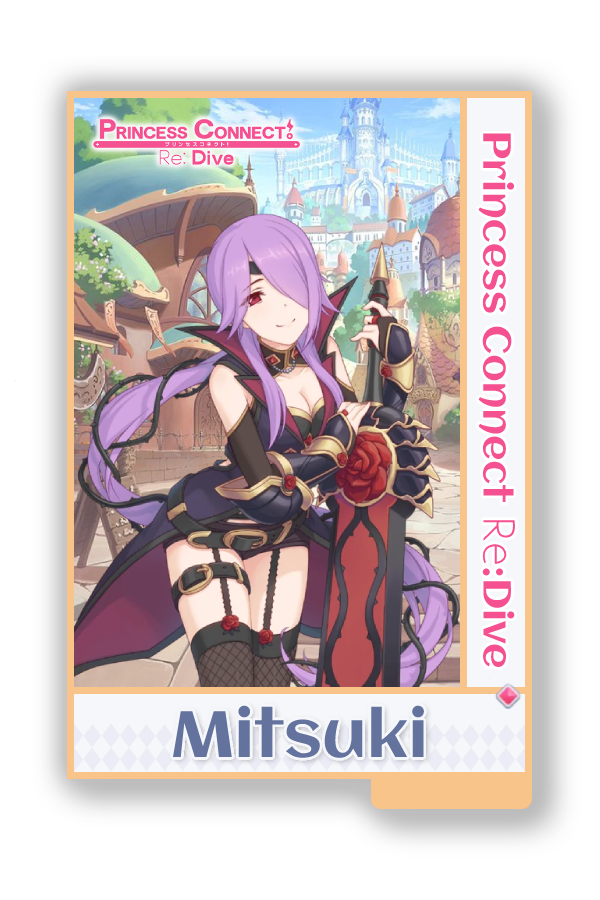
<style>
.page{position:relative;width:600px;height:900px;background:#ffffff}
.page>*{position:absolute;margin:0}
.t1{font:39px "Aclonica-Regular";color:#f55191}
.t2{font:39px "AaarghNormal";color:#f55191}
.t3{font:65px "Aclonica-Regular";color:#64739d}
</style>
<div class="page">
<p class="t1" style="left:478px;top:133px;width:38px;height:534px;rotate:90deg">Princess Connect <span class="t2">Re</span>:Dive</p>
<p class="t3" style="left:172px;top:705px;width:252px;height:53px">Mitsuki</p>
</div>
